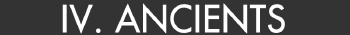
<style>
.page{position:relative;width:350px;height:35px;background:#333333}
.page>*{position:absolute;margin:0}
.t1{font:35px "Futura";color:#ffffff;font-weight:bold}
</style>
<div class="page">
<p class="t1" style="left:62px;top:3px;width:223px;height:31px">IV. ANCIENTS</p>
</div>
